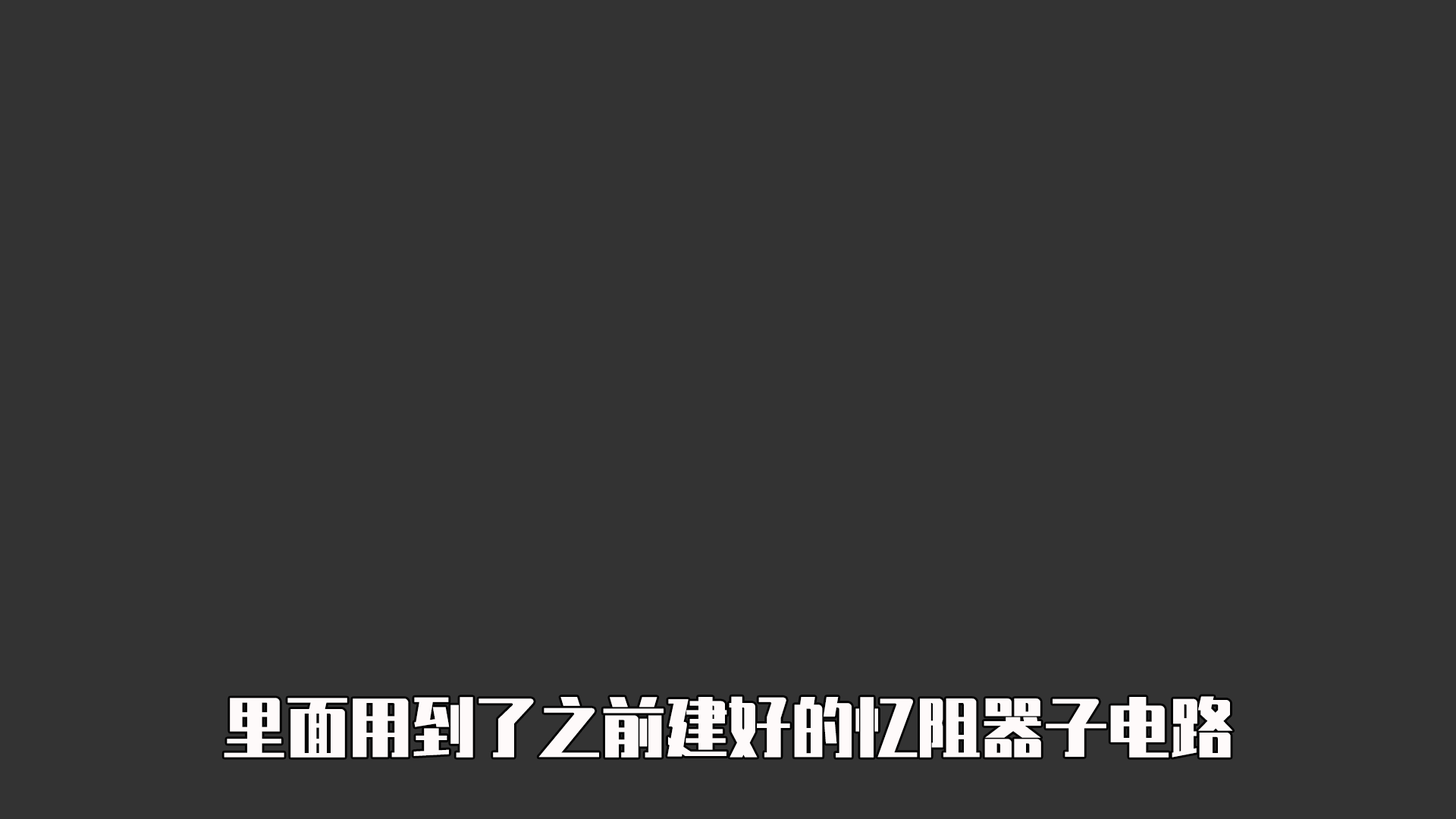
<style>
.page{position:relative;width:1456px;height:819px;background:#333333}
.page>*{position:absolute;margin:0}
.t1{font:63.2px "ZhenyanGB-Regular";color:#fefafa}
</style>
<div class="page">
<p class="t1" style="left:224px;top:696px;width:1009px;height:62px">里面用到了之前建好的忆阻器子电路</p>
</div>
